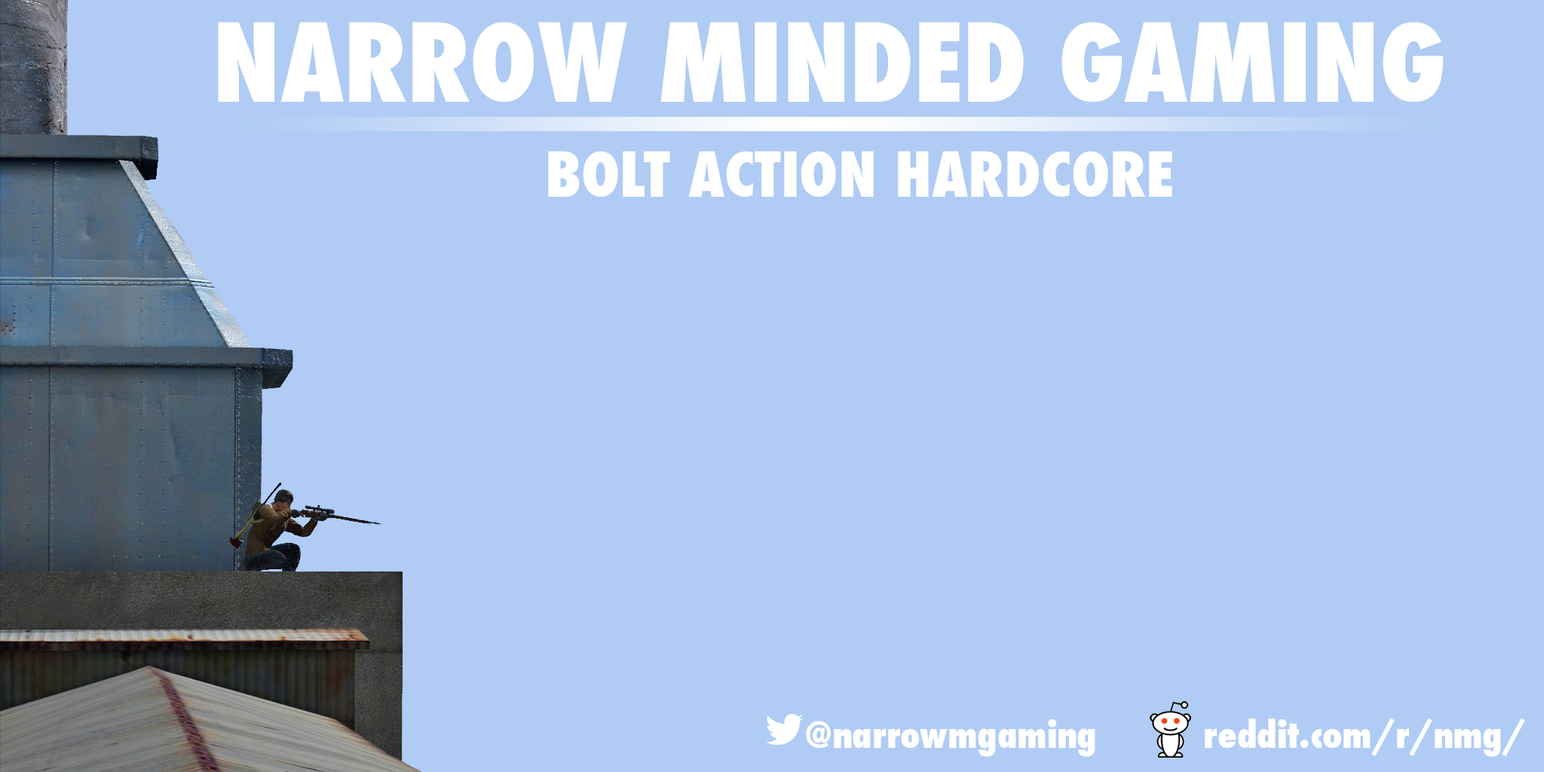
<style>
.page{position:relative;width:1544px;height:772px;background:#b0ccf4}
.page>*{position:absolute;margin:0}
.t1{font:105.6px "Futura-CondensedExtraBold";color:#ffffff}
.t2{font:60.3px "Futura-CondensedExtraBold";color:#ffffff}
.t3{font:35.7px "Futura-CondensedExtraBold";color:#ffffff}
</style>
<div class="page">
<p class="t1" style="left:218px;top:22px;width:1225px;height:80px">NARROW MINDED GAMING</p>
<p class="t2" style="left:548px;top:151px;width:625px;height:46px">BOLT ACTION HARDCORE</p>
<p class="t3" style="left:806px;top:719px;width:290px;height:38px">@narrowmgaming</p>
<p class="t3" style="left:1205px;top:718px;width:320px;height:39px">reddit.com/r/nmg/</p>
</div>
